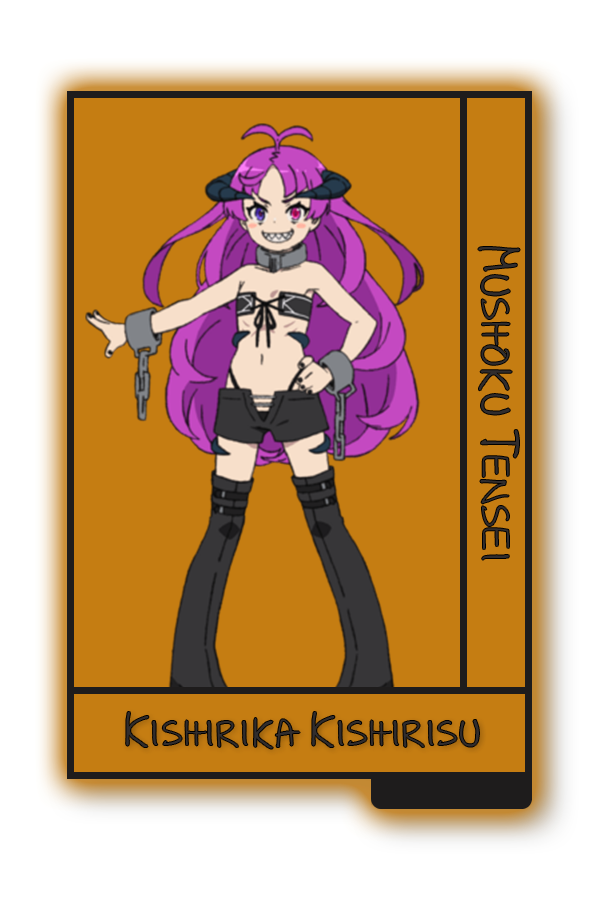
<style>
.page{position:relative;width:600px;height:900px;background:#c57d12}
.page>*{position:absolute;margin:0}
.t1{font:41px "AllCaps";color:#312d2d}
.t2{font:38.3px "AllCaps";color:#312d2d}
</style>
<div class="page">
<p class="t1" style="left:478px;top:247px;width:42px;height:313px;rotate:90deg">Mushoku Tensei</p>
<p class="t2" style="left:126px;top:712px;width:353px;height:37px">Kishirika Kishirisu</p>
</div>
